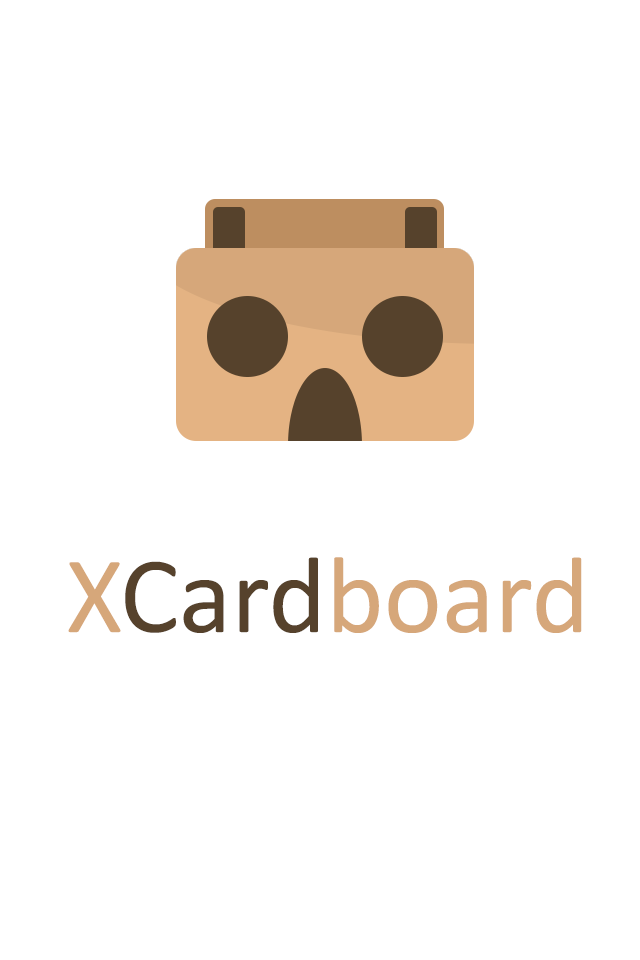
<style>
.page{position:relative;width:640px;height:960px;background:#ffffff}
.page>*{position:absolute;margin:0}
.t1{font:110px "Calibri";color:#d6a77a}
.t2{font:110px "Calibri";color:#56422c}
</style>
<div class="page">
<p class="t1" style="left:68px;top:557px;width:514px;height:76px">X<span class="t2">Card</span>board</p>
</div>
